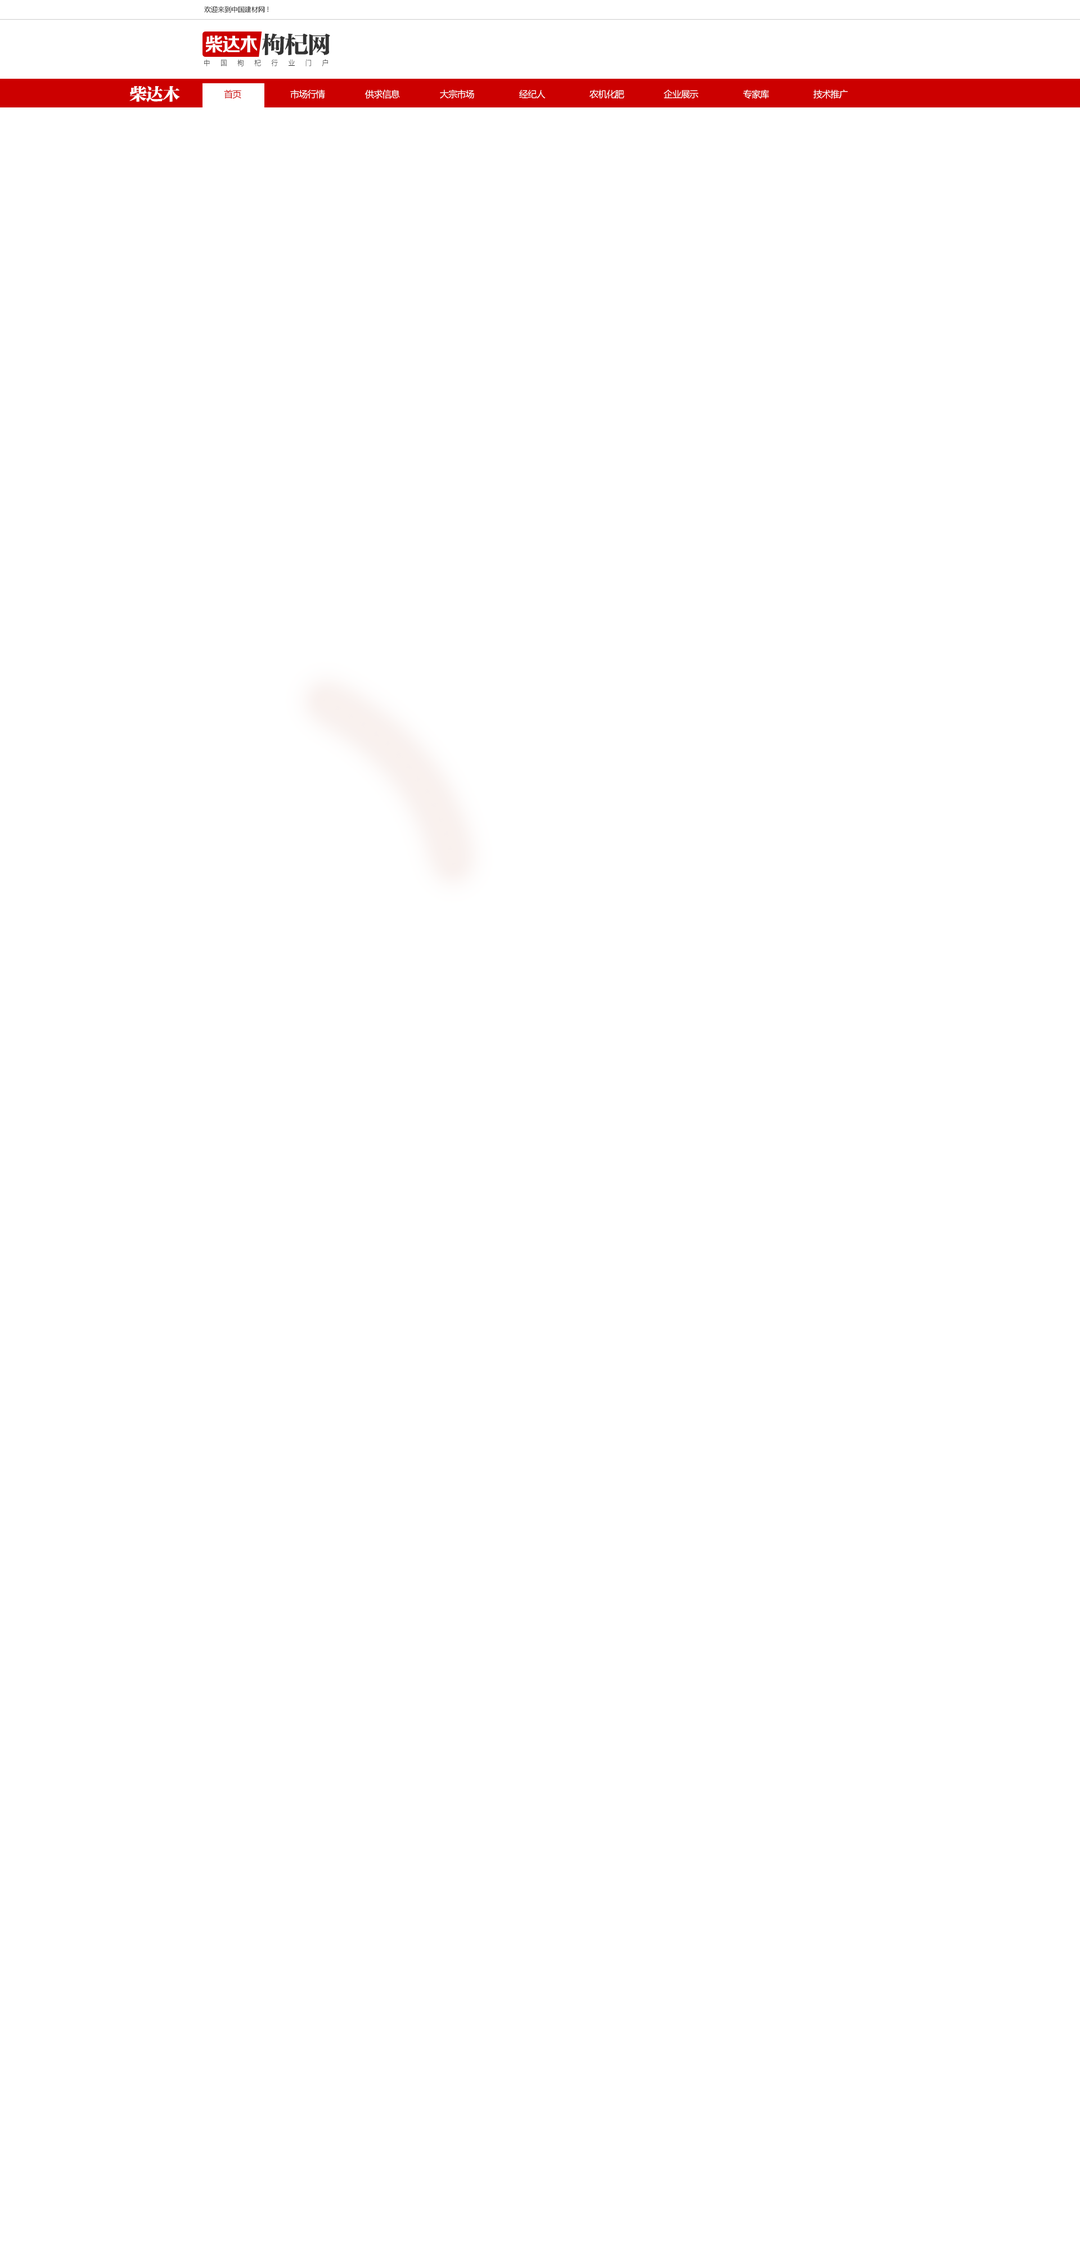
<style>
.page{position:relative;width:1080px;height:2250px;background:#ffffff}
.page>*{position:absolute;margin:0}
.t1{font:6.8px "MicrosoftYaHei";color:#000000}
.t2{font:18.6px "FZZCHJW--GB1-0";letter-spacing:-0.05em;color:#ffffff}
.t3{font:24px "FZTYSK--GBK1-0";letter-spacing:-0.05em;color:#333333}
.t4{font:7.1px "MicrosoftYaHei";letter-spacing:1.6em;color:#333333;scale:0.92 1}
.t5{font:17.6px "FZTYSK--GBK1-0";letter-spacing:-0.05em;color:#ffffff}
.t6{font:9px "MicrosoftYaHei";letter-spacing:-0.05em;color:#cc0000}
.t7{font:9px "MicrosoftYaHei";letter-spacing:-0.05em;color:#ffffff}
</style>
<div class="page">
<p class="t1" style="left:204px;top:6px;width:64px;height:7px">欢迎来到中国建材网 !</p>
<p class="t2" style="left:206px;top:35px;width:51px;height:18px">柴达木</p>
<p class="t3" style="left:262px;top:33px;width:68px;height:22px">枸杞网</p>
<p class="t4" style="left:204px;top:59px;width:124px;height:7px">中国枸杞行业门户</p>
<p class="t5" style="left:129px;top:86px;width:51px;height:16px">柴达木</p>
<p class="t6" style="left:224px;top:89px;width:17px;height:10px">首页</p>
<p class="t7" style="left:290px;top:89px;width:35px;height:10px">市场行情</p>
<p class="t7" style="left:365px;top:89px;width:35px;height:10px">供求信息</p>
<p class="t7" style="left:440px;top:89px;width:34px;height:10px">大宗市场</p>
<p class="t7" style="left:519px;top:89px;width:27px;height:9px">经纪人</p>
<p class="t7" style="left:590px;top:89px;width:34px;height:10px">农机化肥</p>
<p class="t7" style="left:664px;top:89px;width:35px;height:9px">企业展示</p>
<p class="t7" style="left:743px;top:89px;width:26px;height:10px">专家库</p>
<p class="t7" style="left:813px;top:89px;width:35px;height:10px">技术推广</p>
</div>
